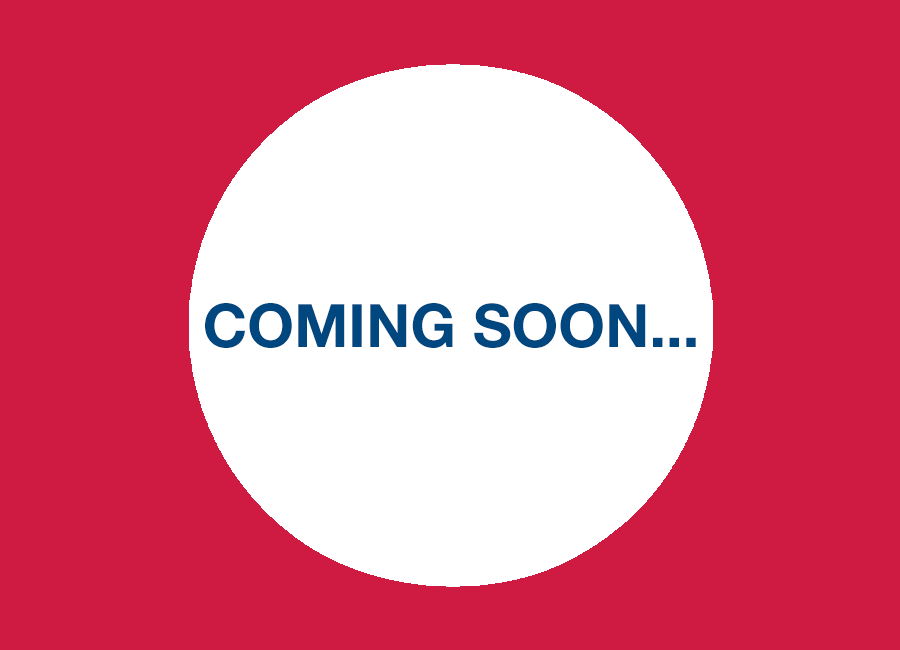
<style>
.page{position:relative;width:900px;height:650px;background:#cf1b41}
.page>*{position:absolute;margin:0}
.t1{font:60px "HelveticaNeue-Bold";color:#00467f}
</style>
<div class="page">
<p class="t1" style="left:205px;top:303px;width:491px;height:45px">COMING SOON...</p>
</div>
